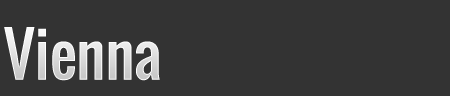
<style>
.page{position:relative;width:450px;height:96px;background:#333333}
.page>*{position:absolute;margin:0}
.t1{font:60px "Oswald"}
</style>
<div class="page">
<p class="t1" style="left:4px;top:27px;width:156px;height:54px">Vienna</p>
</div>
